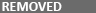
<style>
.page{position:relative;width:96px;height:13px;background:#6b6b6b}
.page>*{position:absolute;margin:0}
.t1{font:14px "Calibri-Bold";color:#ffffff}
</style>
<div class="page">
<p class="t1" style="left:2px;top:2px;width:60px;height:9px">REMOVED</p>
</div>
